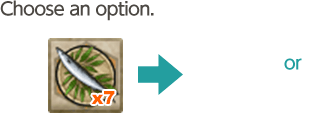
<style>
.page{position:relative;width:313px;height:113px;background:#ffffff}
.page>*{position:absolute;margin:0}
.t1{font:18px "UDShinGoPro-Medium";letter-spacing:-0.04em;color:#4c4843}
.t2{font:18px "UDShinGoPro-Medium";letter-spacing:-0.04em;color:#219e9f}
</style>
<div class="page">
<p class="t1" style="left:0px;top:0px;width:154px;height:21px">Choose an option.</p>
<p class="t2" style="left:284px;top:58px;width:18px;height:12px">or</p>
</div>
